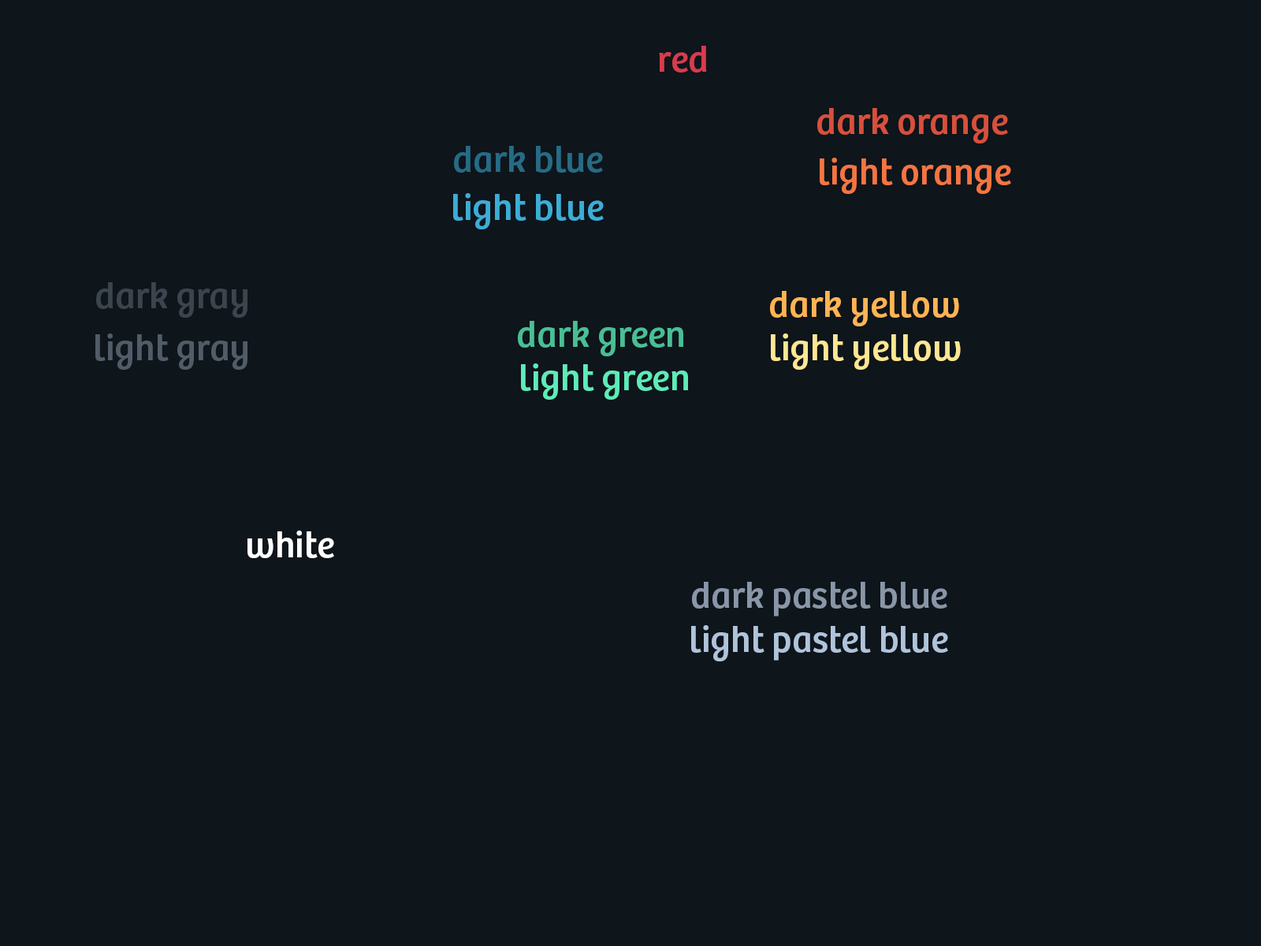
<style>
.page{position:relative;width:1261px;height:946px;background:#0e151b}
.page>*{position:absolute;margin:0}
.t1{font:37.8px "Bree-Regular";color:#d73c4d}
.t2{font:37.8px "Bree-Regular";color:#d7503c}
.t3{font:37.8px "Bree-Regular";color:#266b85}
.t4{font:37.8px "Bree-Regular";color:#f57542}
.t5{font:37.8px "Bree-Regular";color:#3cadd7}
.t6{font:37.8px "Bree-Regular";color:#3c444d}
.t7{font:37.8px "Bree-Regular";color:#ffb454}
.t8{font:37.8px "Bree-Regular";color:#4abe95}
.t9{font:37.8px "Bree-Regular";color:#515c68}
.t10{font:37.8px "Bree-Regular";color:#ffe792}
.t11{font:37.8px "Bree-Regular";color:#5eebb8}
.t12{font:37.8px "Bree-Regular";color:#ffffff}
.t13{font:37.8px "Bree-Regular";color:#8996a8}
.t14{font:37.8px "Bree-Regular";color:#afc4db}
</style>
<div class="page">
<p class="t1" style="left:659px;top:46px;width:48px;height:27px">red</p>
<p class="t2" style="left:817px;top:108px;width:191px;height:35px">dark orange</p>
<p class="t3" style="left:454px;top:146px;width:149px;height:27px">dark blue</p>
<p class="t4" style="left:820px;top:158px;width:191px;height:36px">light orange</p>
<p class="t5" style="left:453px;top:193px;width:151px;height:36px">light blue</p>
<p class="t6" style="left:96px;top:282px;width:151px;height:36px">dark gray</p>
<p class="t7" style="left:770px;top:291px;width:189px;height:35px">dark yellow</p>
<p class="t8" style="left:518px;top:321px;width:165px;height:35px">dark green</p>
<p class="t9" style="left:95px;top:333px;width:152px;height:37px">light gray</p>
<p class="t10" style="left:771px;top:333px;width:190px;height:37px">light yellow</p>
<p class="t11" style="left:521px;top:363px;width:167px;height:37px">light green</p>
<p class="t12" style="left:247px;top:530px;width:87px;height:28px">white</p>
<p class="t13" style="left:692px;top:582px;width:255px;height:34px">dark pastel blue</p>
<p class="t14" style="left:691px;top:625px;width:257px;height:36px">light pastel blue</p>
</div>
